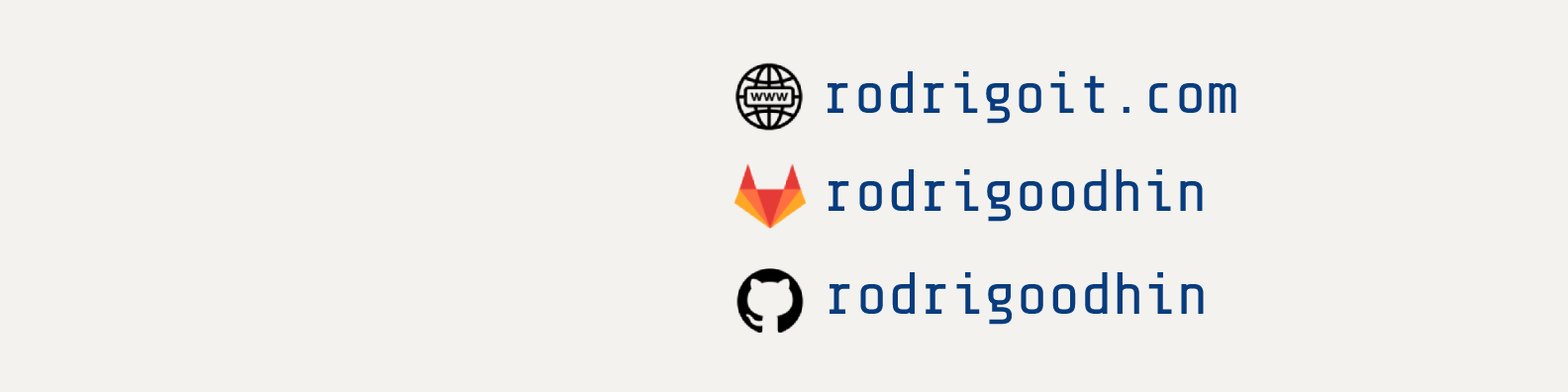
<style>
.page{position:relative;width:1568px;height:392px;background:#f3f2ee}
.page>*{position:absolute;margin:0}
.t1{font:59.4px "Share-TechMono";color:#083c7e}
</style>
<div class="page">
<p class="t1" style="left:828px;top:71px;width:408px;height:53px">rodrigoit.com</p>
<p class="t1" style="left:829px;top:169px;width:374px;height:53px">rodrigoodhin</p>
<p class="t1" style="left:830px;top:272px;width:374px;height:53px">rodrigoodhin</p>
</div>
